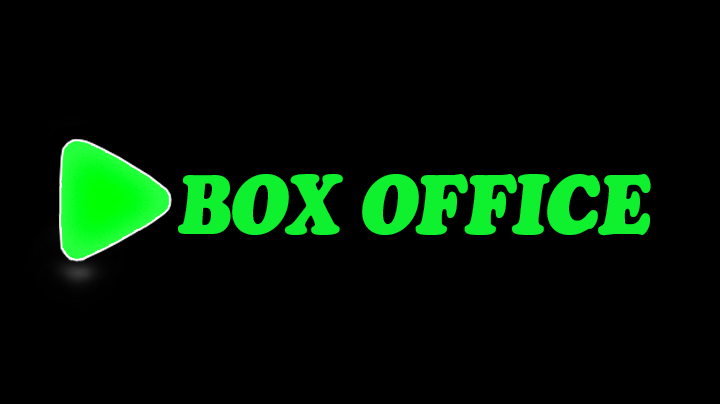
<style>
.page{position:relative;width:720px;height:404px;background:#000000}
.page>*{position:absolute;margin:0}
.t1{font:84.4px "CooperBlackStd-Italic";letter-spacing:-0.025em;color:#0ff02f;scale:0.91 1}
</style>
<div class="page">
<p class="t1" style="left:178px;top:174px;width:473px;height:62px">BOX OFFICE</p>
</div>
